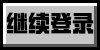
<style>
.page{position:relative;width:100px;height:50px;background:#000000}
.page>*{position:absolute;margin:0}
.t1{font:23.1px "HYLiLiangHeiJ";color:#000000;scale:0.95 1}
</style>
<div class="page">
<p class="t1" style="left:6px;top:12px;width:88px;height:22px">继续登录</p>
</div>
